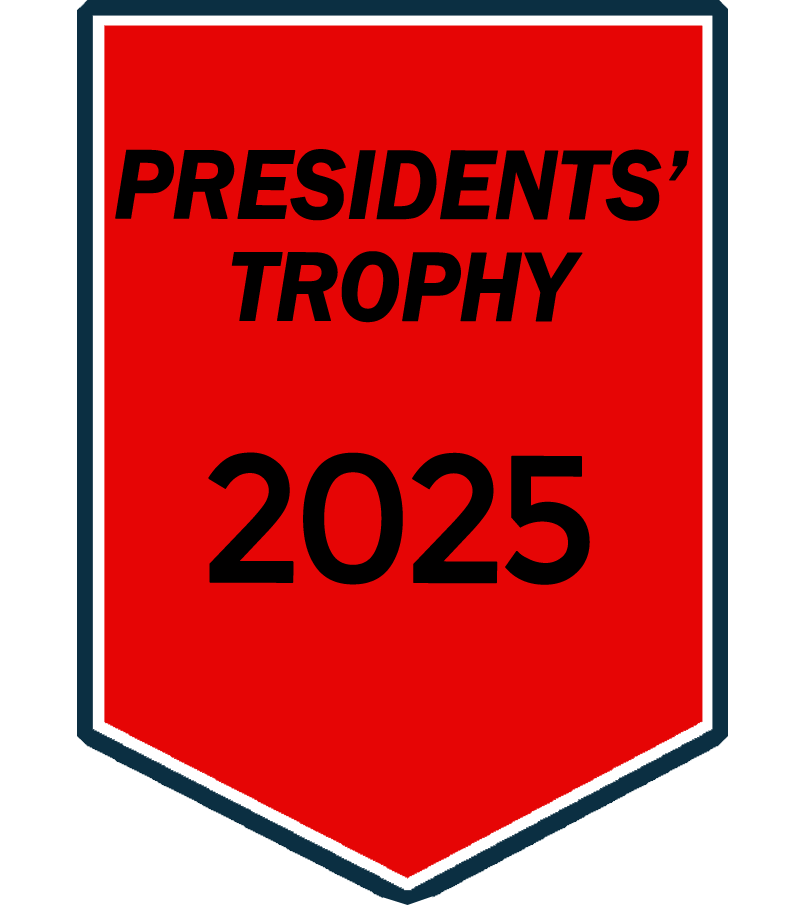
<style>
.page{position:relative;width:805px;height:905px;background:#e60505}
.page>*{position:absolute;margin:0}
.t1{font:102px "FranklinGothic-DemiItalic";letter-spacing:-0.03em;color:#010000;font-weight:bold;scale:0.96 1}
.t2{font:180px "Montserrat-Regular";letter-spacing:-0.075em;color:#010000;font-weight:bold;scale:0.96 1}
</style>
<div class="page">
<p class="t1" style="left:115px;top:149px;width:574px;height:436px;text-align:center">PRESIDENTS’<br>TROPHY<br><br><span class="t2">2025</span></p>
</div>
